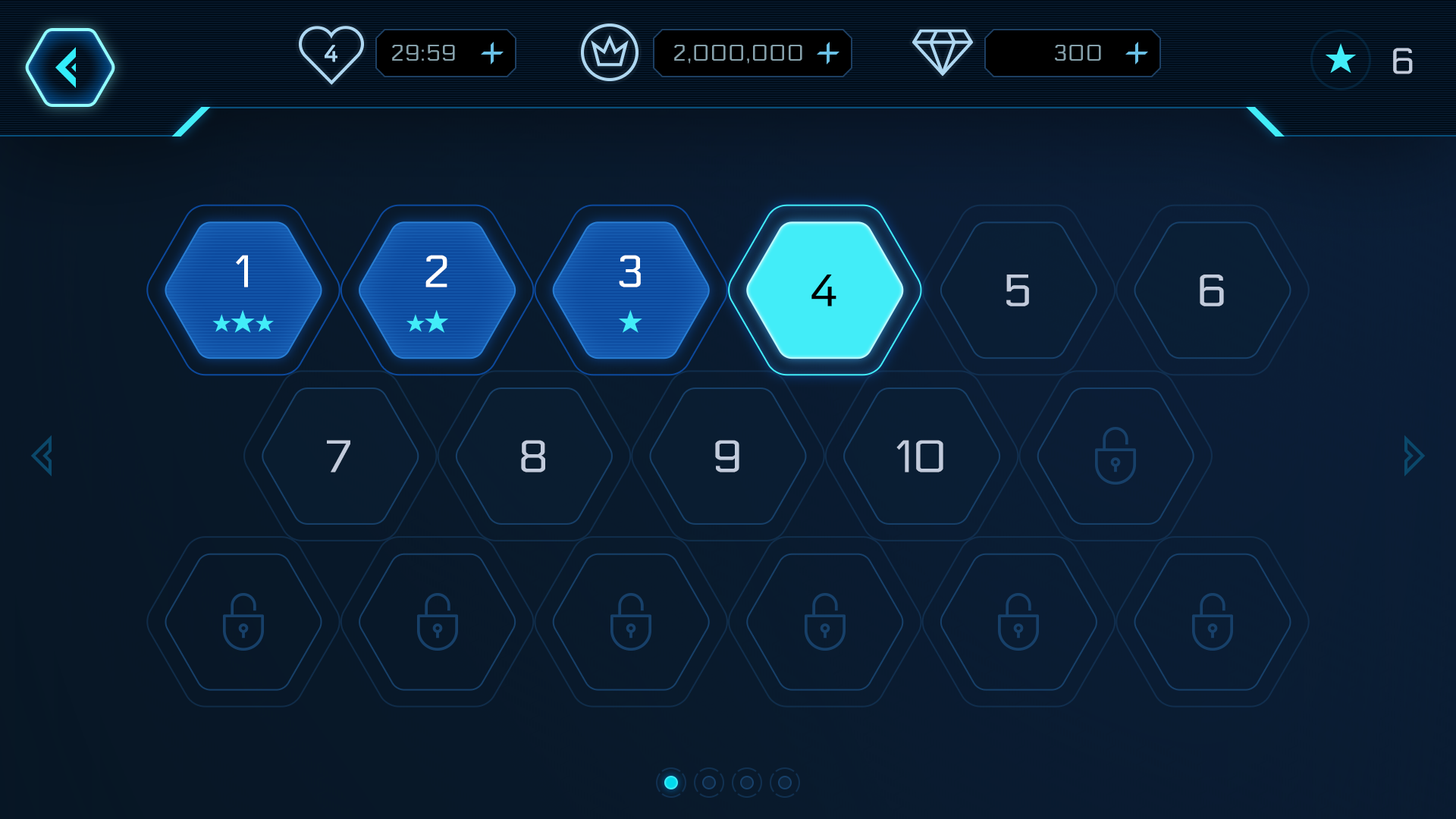
<style>
.page{position:relative;width:1456px;height:819px}
.page>*{position:absolute;margin:0}
.t1{font:22.7px "Electrolize-Regular";color:#aed7f1;font-weight:bold}
.t2{font:22.7px "Electrolize-Regular";color:#86a1ab}
.t3{font:36.4px "Electrolize-Regular";color:#c2cbdc;text-transform:uppercase}
.t4{font:45px "Electrolize-Regular";color:#ffffff;text-transform:uppercase}
.t5{font:45px "Electrolize-Regular";color:#000000;text-transform:uppercase}
.t6{font:45px "Electrolize-Regular";color:#c2cbdc;text-transform:uppercase}
</style>
<div class="page">
<p class="t1" style="left:325px;top:45px;width:12px;height:17px">4</p>
<p class="t2" style="left:392px;top:45px;width:63px;height:16px">29:59</p>
<p class="t2" style="left:674px;top:45px;width:128px;height:19px">2,000,000</p>
<p class="t2" style="left:1055px;top:45px;width:46px;height:16px">300</p>
<p class="t3" style="left:1393px;top:48px;width:20px;height:26px">6</p>
<p class="t4" style="left:236px;top:255px;width:12px;height:32px">1</p>
<p class="t4" style="left:425px;top:255px;width:22px;height:32px">2</p>
<p class="t4" style="left:619px;top:255px;width:22px;height:32px">3</p>
<p class="t5" style="left:811px;top:275px;width:25px;height:31px">4</p>
<p class="t6" style="left:1006px;top:275px;width:23px;height:31px">5</p>
<p class="t6" style="left:1200px;top:275px;width:24px;height:31px">6</p>
<p class="t6" style="left:327px;top:440px;width:23px;height:32px">7</p>
<p class="t6" style="left:521px;top:440px;width:24px;height:32px">8</p>
<p class="t6" style="left:715px;top:440px;width:24px;height:32px">9</p>
<p class="t6" style="left:896px;top:440px;width:47px;height:32px">10</p>
</div>
